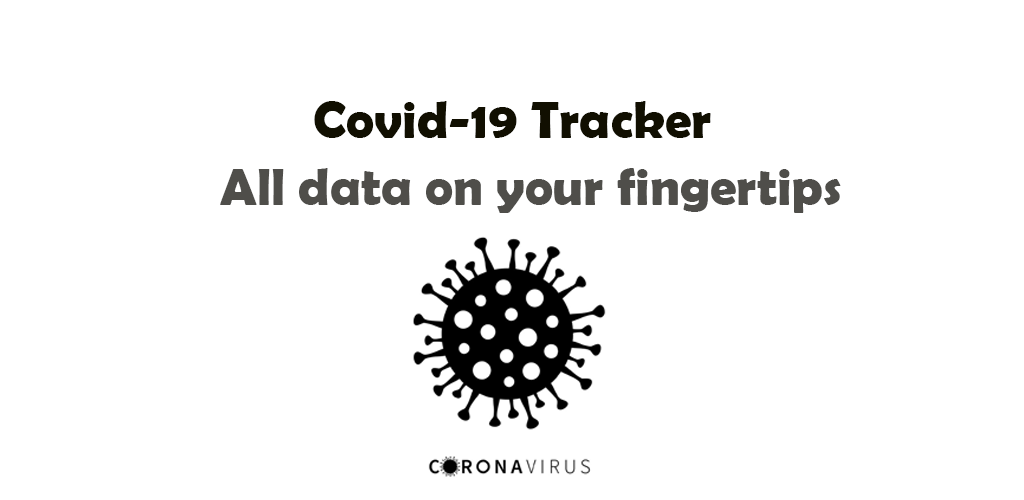
<style>
.page{position:relative;width:1024px;height:500px;background:#ffffff}
.page>*{position:absolute;margin:0}
.t1{font:53.1px "BerlinSansFBDemi-Bold";color:#110f01}
.t2{font:52.9px "BerlinSansFBDemi-Bold";color:#4f4e4a}
</style>
<div class="page">
<p class="t1" style="left:314px;top:101px;width:397px;height:37px">Covid-19 Tracker</p>
<p class="t2" style="left:220px;top:168px;width:621px;height:45px">All data on your fingertips</p>
</div>
